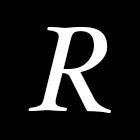
<style>
.page{position:relative;width:140px;height:140px;background:#010101}
.page>*{position:absolute;margin:0}
.t1{font:120px "HoeflerText-Italic";color:#ffffff}
</style>
<div class="page">
<p class="t1" style="left:28px;top:27px;width:83px;height:86px">R</p>
</div>
